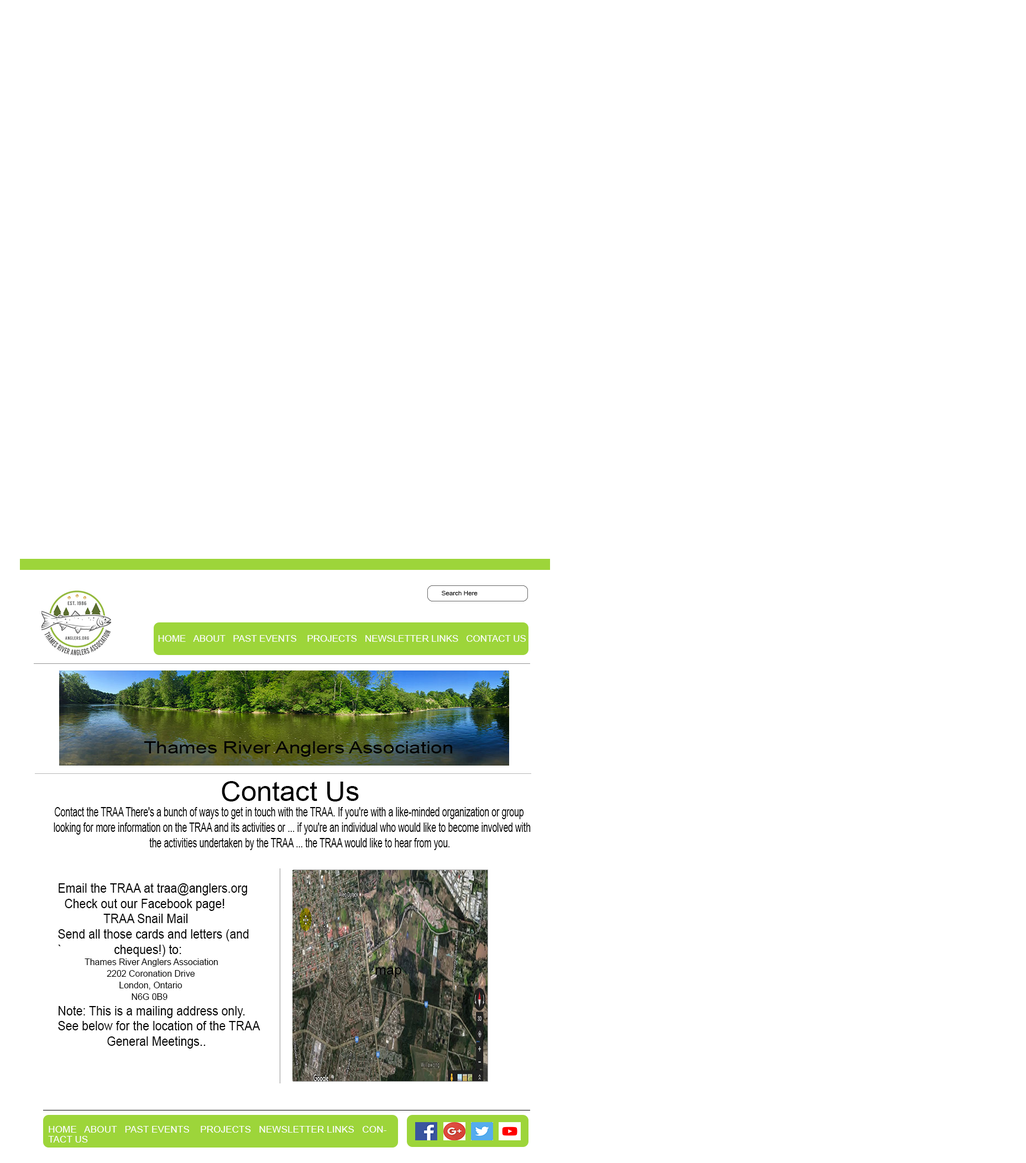
<style>
.page{position:relative;width:1026px;height:1163px;background:#ffffff}
.page>*{position:absolute;margin:0}
.t1{font:5.9px "ArialMT";color:#040404;scale:1.09 1}
.t2{font:9.7px "ArialMT";color:#040404;scale:1.09 1}
.t3{font:8.6px "ArialMT";color:#fefdfd;scale:1.08 1}
.t4{font:16.6px "ArialMT";color:#040404;scale:1.23 1}
.t5{font:26.5px "ArialMT";color:#000000;scale:1.06 1}
.t6{font:12.7px "ArialMT";color:#000000;scale:0.68 1}
.t7{font:12.1px "ArialMT";color:#000000;scale:0.68 1}
.t8{font:12.8px "ArialMT";color:#000000;scale:0.92 1}
.t9{font:9.6px "ArialMT";color:#000000;scale:0.92 1}
.t10{font:13.3px "ArialMT";color:#000000;scale:1.06 1}
.t11{font:8.6px "ArialMT";color:#fefdfd;scale:1.1 1}
</style>
<div class="page">
<p class="t1" style="left:442px;top:591px;width:35px;height:4px"><span class="t2">  </span>  Search Here</p>
<p class="t3" style="left:158px;top:635px;width:368px;height:7px">HOME   ABOUT   PAST EVENTS    PROJECTS   NEWSLETTER LINKS   CONTACT US</p>
<p class="t4" style="left:144px;top:741px;width:308px;height:15px">Thames River Anglers Association</p>
<p class="t5" style="left:222px;top:781px;width:137px;height:20px">Contact Us</p>
<p class="t6" style="left:54px;top:807px;width:476px;height:43px"><span class="t7">            </span>Contact the TRAA There's a bunch of ways to get in touch with the TRAA. If you're with a like-minded organization or group <br>           looking for more information on the TRAA and its activities or ... if you're an individual who would like to become involved with <br>                                                   the activities undertaken by the TRAA ... the TRAA would like to hear from you.</p>
<p class="t8" style="left:58px;top:883px;width:202px;height:165px">Email the TRAA at traa@anglers.org<br>  Check out our Facebook page!<br>              TRAA Snail Mail<br>Send all those cards and letters (and                                                                                                       `                cheques!) to:<br><span class="t9">           Thames River Anglers Association<br>                    2202 Coronation Drive<br>                         London, Ontario<br>                              N6G 0B9<br></span>Note: This is a mailing address only. <br>See below for the location of the TRAA                                 <br>               General Meetings..</p>
<p class="t10" style="left:375px;top:967px;width:26px;height:10px">map</p>
<p class="t11" style="left:48px;top:1126px;width:338px;height:16px">HOME   ABOUT   PAST EVENTS    PROJECTS   NEWSLETTER LINKS   CONTACT US</p>
</div>
